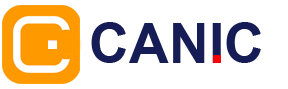
<style>
.page{position:relative;width:288px;height:89px;background:#ffffff}
.page>*{position:absolute;margin:0}
.t1{font:55.6px "Arial-BoldMT";color:#151c56}
</style>
<div class="page">
<p class="t1" style="left:91px;top:22px;width:170px;height:41px">CANIC</p>
</div>
